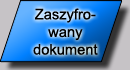
<style>
.page{position:relative;width:130px;height:70px}
.page>*{position:absolute;margin:0}
.t1{font:14.7px "ArialMT";color:#000000}
</style>
<div class="page">
<p class="t1" style="left:33px;top:8px;width:65px;height:47px;text-align:center">Zaszyfro-<br>wany<br>dokument</p>
</div>
